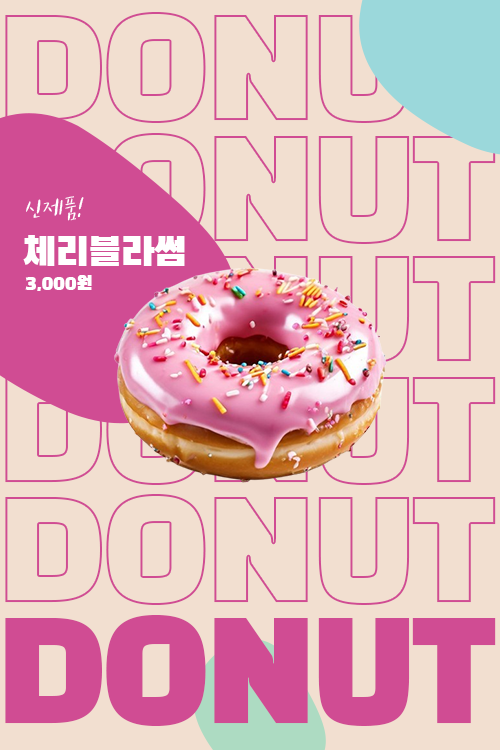
<style>
.page{position:relative;width:500px;height:750px;background:#f2dfd0}
.page>*{position:absolute;margin:0}
.t1{font:30px "tvNEnjoystoriesM";letter-spacing:-0.02em;color:#ffffff}
.t2{font:40px "BlackHanSans-Regular";letter-spacing:-0.02em;color:#ffffff}
.t3{font:20px "BlackHanSans-Regular";letter-spacing:-0.02em;color:#ffffff}
.t4{font:140px "BlackHanSans-Regular";letter-spacing:-0.02em;color:#d04c93}
</style>
<div class="page">
<p class="t1" style="left:26px;top:196px;width:58px;height:25px">신제품!</p>
<p class="t2" style="left:23px;top:235px;width:162px;height:31px">체리블라썸</p>
<p class="t3" style="left:25px;top:275px;width:67px;height:16px">3,000원</p>
<p class="t4" style="left:5px;top:615px;width:491px;height:111px">DONUT</p>
</div>
